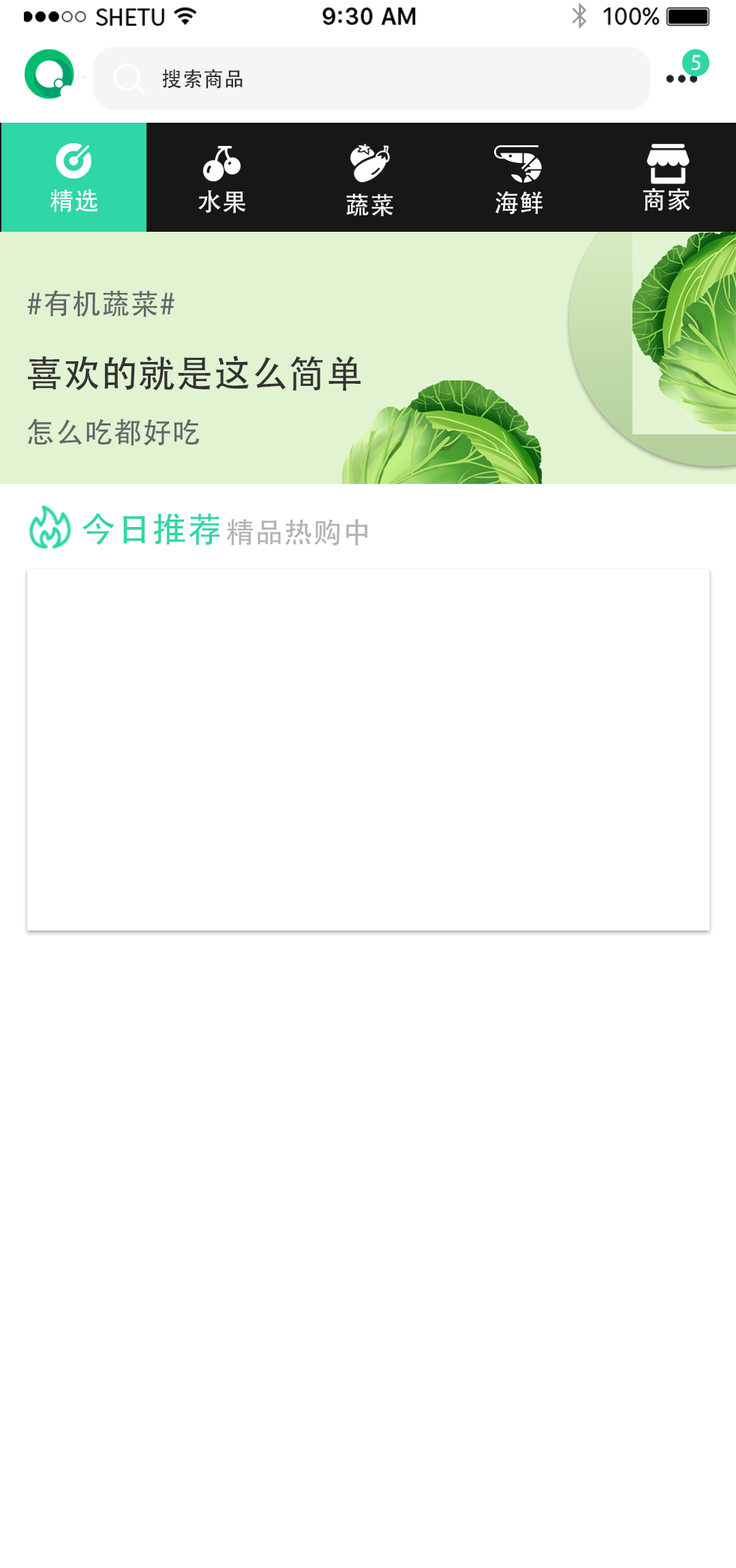
<style>
.page{position:relative;width:736px;height:1568px;background:#ffffff}
.page>*{position:absolute;margin:0}
.t1{font:19.8px "AdobeHeitiStd-Regular";letter-spacing:0.02em;color:#f5f5f5}
.t2{font:20.5px "AdobeHeitiStd-Regular";letter-spacing:0.02em;color:#2c2c2c}
.t3{font:24.5px "AdobeHeitiStd-Regular";letter-spacing:0.02em;color:#ffffff}
.t4{font:28.6px "AdobeHeitiStd-Regular";letter-spacing:0.02em;color:#666666}
.t5{font:36.8px "AdobeHeitiStd-Regular";letter-spacing:0.02em;color:#333333}
.t6{font:34.8px "AdobeHeitiStd-Regular";letter-spacing:0.02em;color:#2ed7a5}
.t7{font:28.6px "AdobeHeitiStd-Regular";letter-spacing:0.02em;color:#b3b3b3}
</style>
<div class="page">
<p class="t1" style="left:691px;top:55px;width:10px;height:15px">5</p>
<p class="t2" style="left:162px;top:69px;width:81px;height:20px">搜索商品</p>
<p class="t3" style="left:50px;top:189px;width:48px;height:23px">精选</p>
<p class="t3" style="left:198px;top:190px;width:48px;height:23px">水果</p>
<p class="t3" style="left:346px;top:194px;width:47px;height:22px">蔬菜</p>
<p class="t3" style="left:496px;top:191px;width:47px;height:24px">海鲜</p>
<p class="t3" style="left:644px;top:187px;width:47px;height:24px">商家</p>
<p class="t4" style="left:27px;top:290px;width:148px;height:27px">#有机蔬菜#</p>
<p class="t5" style="left:28px;top:355px;width:333px;height:36px">喜欢的就是这么简单</p>
<p class="t4" style="left:27px;top:419px;width:173px;height:27px">怎么吃都好吃</p>
<p class="t6" style="left:82px;top:513px;width:138px;height:32px">今日推荐</p>
<p class="t7" style="left:226px;top:519px;width:142px;height:26px">精品热购中</p>
</div>
